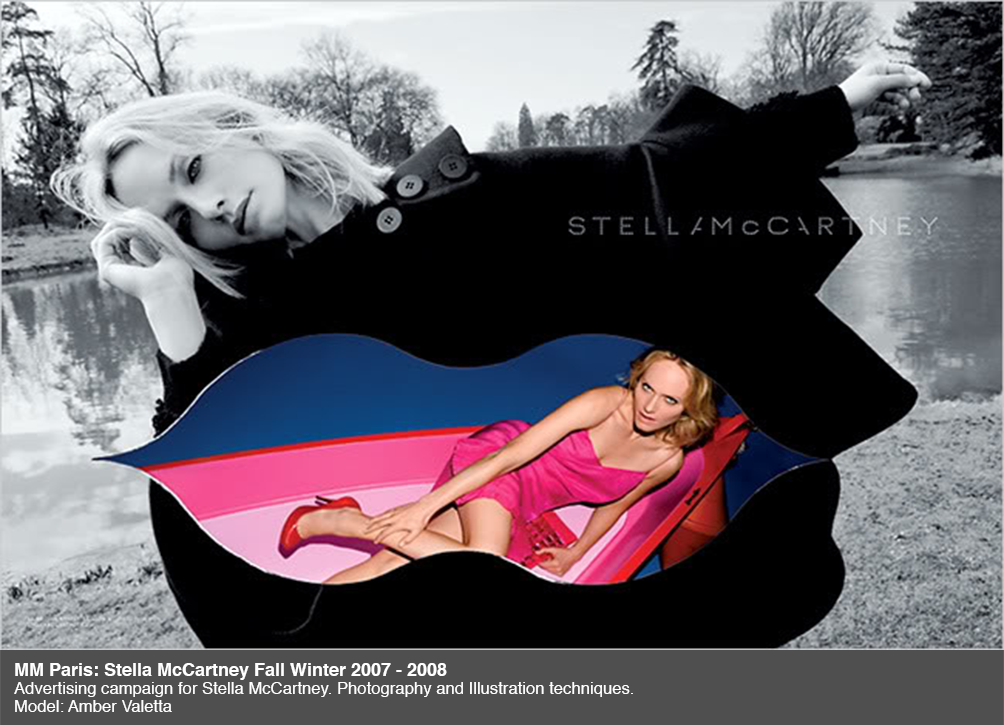
<style>
.page{position:relative;width:1004px;height:725px;background:#000000}
.page>*{position:absolute;margin:0}
.t1{font:16.7px/18px "Helvetica";color:#ffffff}
.t2{font:18px/18px "Helvetica-Bold";color:#ffffff}
</style>
<div class="page">
<p class="t1" style="left:14px;top:663px;width:619px;height:49px"><span class="t2">MM Paris: Stella McCartney Fall Winter 2007 - 2008<br></span>Advertising campaign for Stella McCartney. Photography and Illustration techniques.<br>Model: Amber Valetta</p>
</div>
